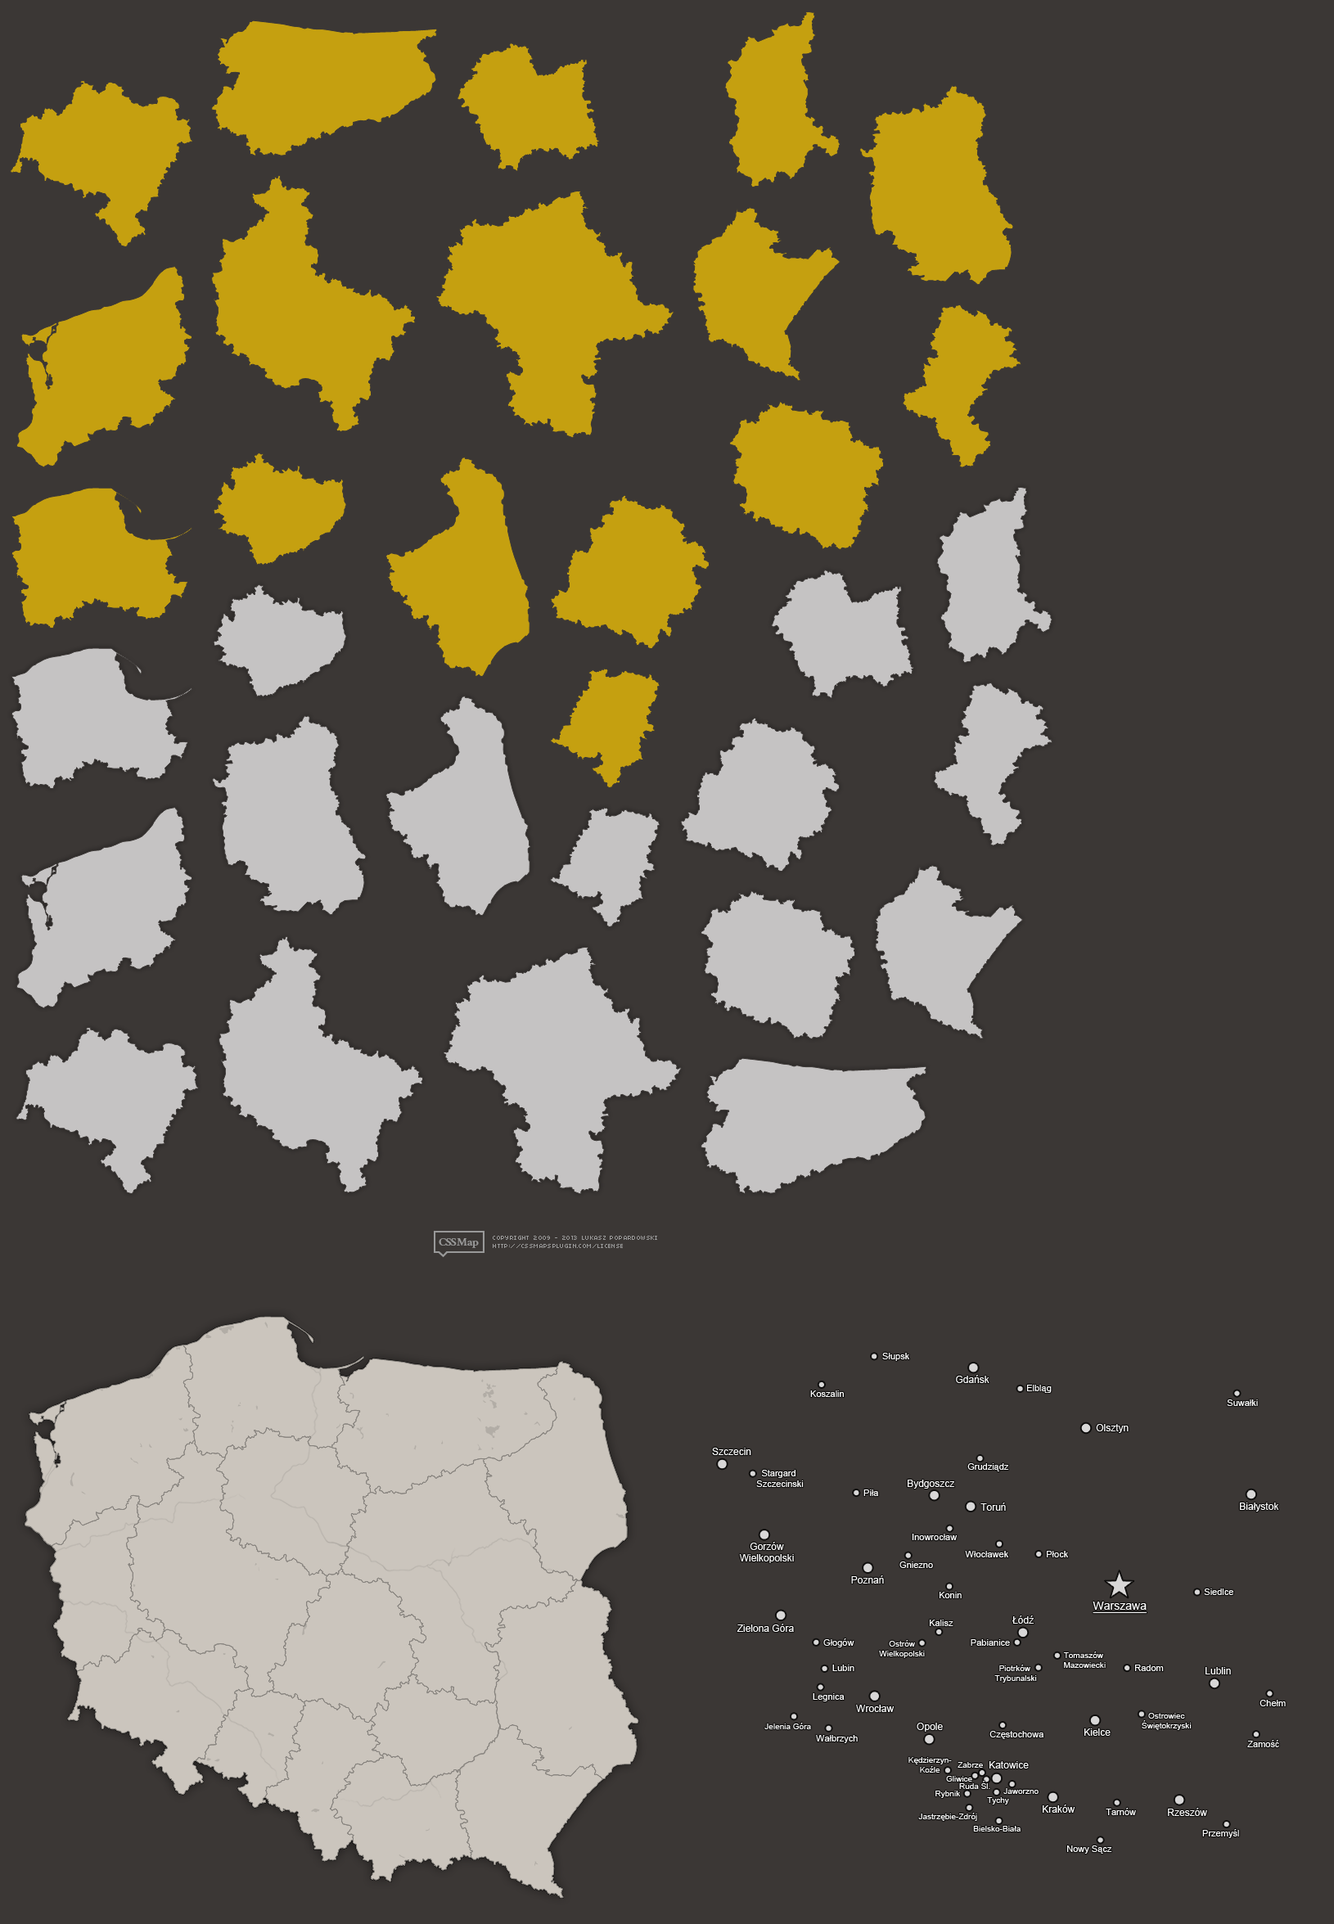
<style>
.page{position:relative;width:1334px;height:1924px;background:#3b3735}
.page>*{position:absolute;margin:0}
.t1{font:9px "ArialMT";color:#ffffff}
.t2{font:9.8px "ArialMT";color:#ffffff}
.t3{font:11.5px "ArialMT";color:#ffffff;text-decoration:underline}
.t4{font:8.2px "ArialMT";color:#ffffff}
</style>
<div class="page">
<p class="t1" style="left:882px;top:1353px;width:27px;height:8px">Słupsk</p>
<p class="t2" style="left:956px;top:1375px;width:33px;height:8px">Gdańsk</p>
<p class="t1" style="left:1027px;top:1385px;width:25px;height:8px">Elbląg</p>
<p class="t1" style="left:810px;top:1390px;width:34px;height:7px">Koszalin</p>
<p class="t1" style="left:1227px;top:1399px;width:31px;height:7px">Suwałki</p>
<p class="t2" style="left:1096px;top:1424px;width:33px;height:9px">Olsztyn</p>
<p class="t2" style="left:712px;top:1448px;width:39px;height:7px">Szczecin</p>
<p class="t1" style="left:756px;top:1470px;width:48px;height:17px;text-align:center">Stargard <br>Szczecinski</p>
<p class="t1" style="left:967px;top:1463px;width:42px;height:8px">Grudziądz</p>
<p class="t2" style="left:908px;top:1480px;width:46px;height:9px">Bydgoszcz</p>
<p class="t1" style="left:863px;top:1489px;width:15px;height:7px">Piła</p>
<p class="t2" style="left:980px;top:1503px;width:26px;height:8px">Toruń</p>
<p class="t2" style="left:1240px;top:1503px;width:39px;height:9px">Białystok</p>
<p class="t2" style="left:739px;top:1542px;width:55px;height:21px;text-align:center">Gorzów<br>Wielkopolski</p>
<p class="t1" style="left:912px;top:1534px;width:46px;height:6px">Inowrocław</p>
<p class="t1" style="left:965px;top:1551px;width:43px;height:6px">Włocławek</p>
<p class="t1" style="left:1047px;top:1551px;width:21px;height:6px">Płock</p>
<p class="t1" style="left:899px;top:1561px;width:34px;height:7px">Gniezno</p>
<p class="t2" style="left:851px;top:1575px;width:33px;height:9px">Poznań</p>
<p class="t1" style="left:1204px;top:1588px;width:29px;height:7px">Siedlce</p>
<p class="t1" style="left:940px;top:1592px;width:22px;height:6px">Konin</p>
<p class="t3" style="left:1093px;top:1602px;width:54px;height:12px">Warszawa</p>
<p class="t2" style="left:737px;top:1624px;width:57px;height:8px">Zielona Góra</p>
<p class="t1" style="left:930px;top:1620px;width:23px;height:6px">Kalisz</p>
<p class="t2" style="left:1012px;top:1615px;width:22px;height:9px">Łódź</p>
<p class="t1" style="left:823px;top:1638px;width:31px;height:9px">Głogów</p>
<p class="t4" style="left:879px;top:1640px;width:46px;height:18px;text-align:center">Ostrów<br>Wielkopolski</p>
<p class="t1" style="left:971px;top:1639px;width:39px;height:7px">Pabianice</p>
<p class="t4" style="left:1063px;top:1652px;width:43px;height:16px;text-align:center">Tomaszów <br>Mazowiecki</p>
<p class="t1" style="left:832px;top:1665px;width:22px;height:6px">Lubin</p>
<p class="t4" style="left:994px;top:1665px;width:43px;height:18px;text-align:center">Piotrków <br>Trybunalski</p>
<p class="t1" style="left:1135px;top:1665px;width:29px;height:6px">Radom</p>
<p class="t2" style="left:1205px;top:1667px;width:26px;height:7px">Lublin</p>
<p class="t1" style="left:813px;top:1693px;width:32px;height:8px">Legnica</p>
<p class="t2" style="left:856px;top:1705px;width:38px;height:7px">Wrocław</p>
<p class="t1" style="left:1259px;top:1700px;width:27px;height:6px">Chełm</p>
<p class="t4" style="left:1142px;top:1713px;width:50px;height:17px;text-align:center">Ostrowiec<br>Świętokrzyski</p>
<p class="t4" style="left:764px;top:1723px;width:47px;height:6px">Jelenia Góra</p>
<p class="t2" style="left:917px;top:1723px;width:26px;height:9px">Opole</p>
<p class="t1" style="left:989px;top:1731px;width:54px;height:8px">Częstochowa</p>
<p class="t2" style="left:1084px;top:1728px;width:27px;height:8px">Kielce</p>
<p class="t1" style="left:816px;top:1735px;width:42px;height:8px">Wałbrzych</p>
<p class="t1" style="left:1247px;top:1740px;width:32px;height:7px">Zamość</p>
<p class="t4" style="left:908px;top:1757px;width:44px;height:16px;text-align:center">Kędzierzyn-<br>Koźle</p>
<p class="t4" style="left:958px;top:1762px;width:25px;height:6px">Zabrze</p>
<p class="t2" style="left:989px;top:1761px;width:40px;height:8px">Katowice</p>
<p class="t4" style="left:946px;top:1776px;width:26px;height:6px">Gliwice</p>
<p class="t4" style="left:959px;top:1781px;width:31px;height:8px">Ruda Śl.</p>
<p class="t4" style="left:935px;top:1791px;width:25px;height:7px">Rybnik</p>
<p class="t4" style="left:1003px;top:1788px;width:36px;height:6px">Jaworzno</p>
<p class="t4" style="left:987px;top:1797px;width:22px;height:8px">Tychy</p>
<p class="t2" style="left:1043px;top:1805px;width:32px;height:8px">Kraków</p>
<p class="t4" style="left:918px;top:1813px;width:59px;height:8px">Jastrzębie-Zdrój</p>
<p class="t1" style="left:1106px;top:1808px;width:30px;height:7px">Tarnów</p>
<p class="t2" style="left:1168px;top:1808px;width:39px;height:8px">Rzeszów</p>
<p class="t4" style="left:973px;top:1826px;width:48px;height:6px">Bielsko-Biała</p>
<p class="t1" style="left:1202px;top:1829px;width:37px;height:9px">Przemyśl</p>
<p class="t1" style="left:1067px;top:1845px;width:45px;height:9px">Nowy Sącz</p>
</div>
